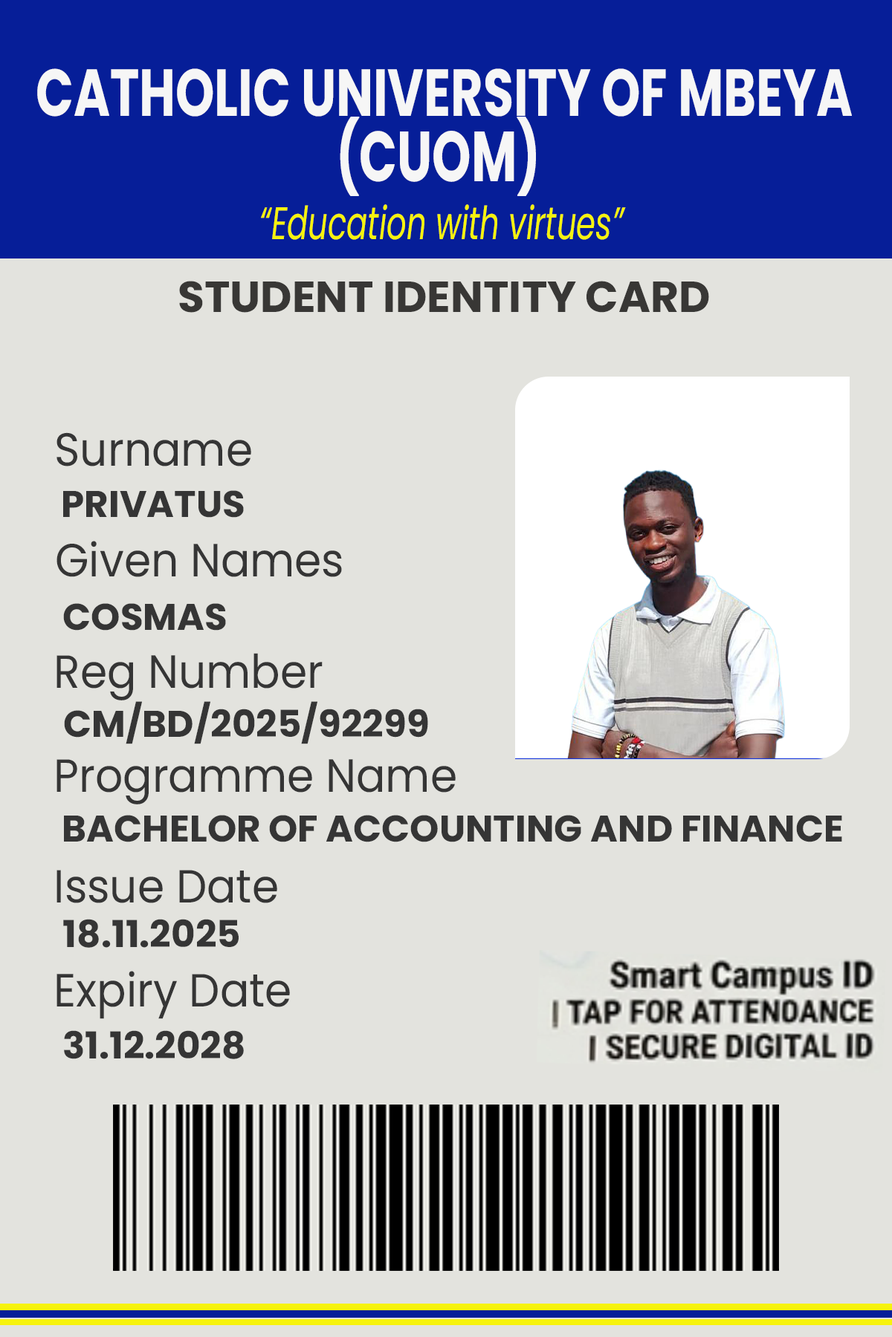
<style>
.page{position:relative;width:892px;height:1337px;background:#e3e3de}
.page>*{position:absolute;margin:0}
.t1{font:66.3px "Poppins-Bold";color:#f6f6f6;scale:0.75 1}
.t2{font:70.9px "Poppins-Bold";color:#f6f6f6;scale:0.7 1}
.t3{font:45.7px "Poppins-Italic";color:#f6f30d;scale:0.68 1}
.t4{font:43.3px "Poppins-Bold";color:#383735}
.t5{font:46.5px "Poppins-Regular";color:#353535;scale:0.93 1}
.t6{font:37.2px "Poppins-Bold";color:#353535}
.t7{font:37.2px "Poppins-Bold";color:#353535;text-transform:uppercase}
</style>
<div class="page">
<p class="t1" style="left:37px;top:68px;width:814px;height:49px">CATHOLIC UNIVERSITY OF MBEYA</p>
<p class="t2" style="left:340px;top:117px;width:196px;height:79px">(CUOM)</p>
<p class="t3" style="left:261px;top:204px;width:365px;height:36px">“Education with virtues”</p>
<p class="t4" style="left:179px;top:281px;width:530px;height:32px">STUDENT IDENTITY CARD</p>
<p class="t5" style="left:56px;top:432px;width:195px;height:35px">Surname</p>
<p class="t6" style="left:63px;top:490px;width:181px;height:28px">PRIVATUS</p>
<p class="t5" style="left:56px;top:541px;width:286px;height:36px">Given Names</p>
<p class="t6" style="left:63px;top:603px;width:163px;height:28px">COSMAS</p>
<p class="t5" style="left:56px;top:653px;width:266px;height:48px">Reg Number</p>
<p class="t6" style="left:64px;top:701px;width:364px;height:43px">CM/BD/2025/92299</p>
<p class="t5" style="left:56px;top:759px;width:399px;height:46px">Programme Name</p>
<p class="t7" style="left:64px;top:815px;width:778px;height:28px">Bachelor of Accounting and Finance</p>
<p class="t5" style="left:56px;top:870px;width:221px;height:33px">Issue Date</p>
<p class="t6" style="left:63px;top:919px;width:176px;height:29px">18.11.2025</p>
<p class="t5" style="left:56px;top:971px;width:234px;height:48px">Expiry Date</p>
<p class="t6" style="left:64px;top:1031px;width:180px;height:29px">31.12.2028</p>
</div>
